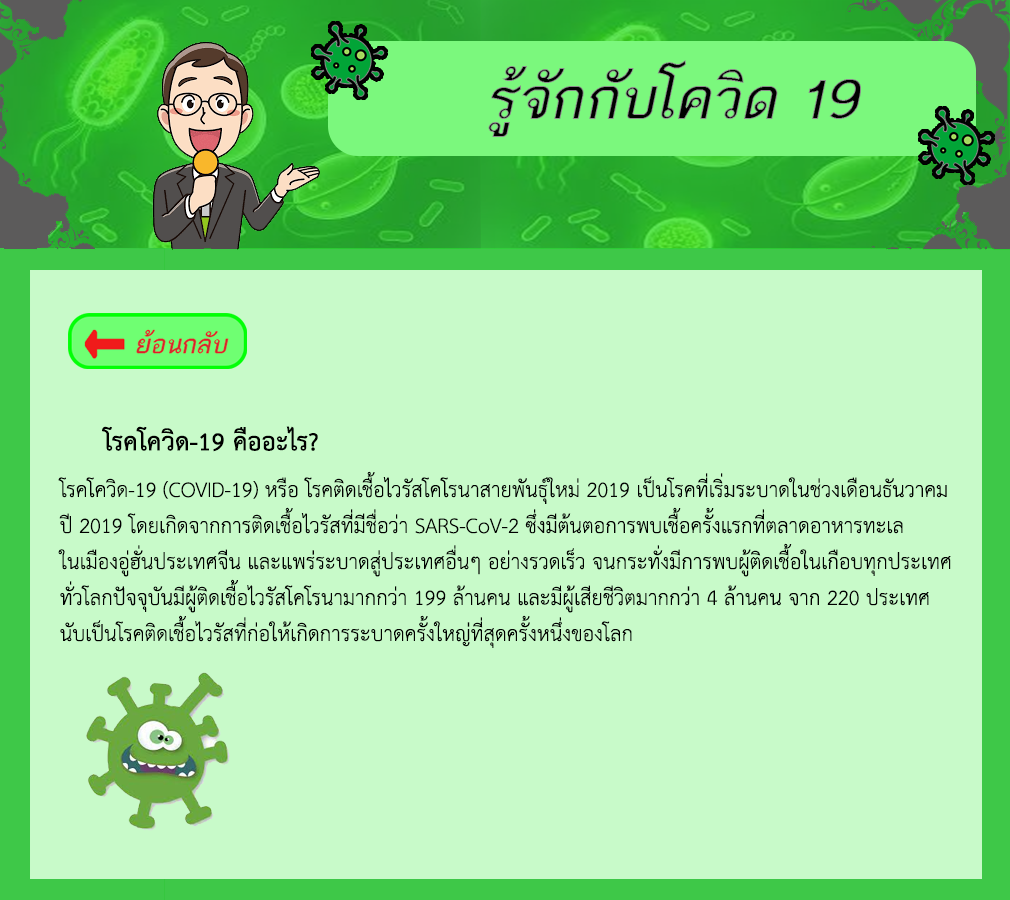
<style>
.page{position:relative;width:1010px;height:900px;background:#c8fac9}
.page>*{position:absolute;margin:0}
.t1{font:36px "THSarabunPSK-Bold";color:#000000}
.t2{font:30px "THSarabunPSK";color:#000000}
</style>
<div class="page">
<p class="t1" style="left:102px;top:426px;width:216px;height:26px">โรคโควิด-19 คืออะไร?</p>
<p class="t2" style="left:58px;top:471px;width:893px;height:177px">โรคโควิด-19 (COVID-19) หรือ โรคติดเชื้อไวรัสโคโรนาสายพันธุ์ใหม่ 2019 เป็นโรคที่เริ่มระบาดในช่วงเดือนธันวาคม<br>ปี 2019 โดยเกิดจากการติดเชื้อไวรัสที่มีชื่อว่า SARS-CoV-2 ซึ่งมีต้นตอการพบเชื้อครั้งแรกที่ตลาดอาหารทะเล<br>ในเมืองอู่ฮั่นประเทศจีน และแพร่ระบาดสู่ประเทศอื่นๆ อย่างรวดเร็ว จนกระทั่งมีการพบผู้ติดเชื้อในเกือบทุกประเทศ<br>ทั่วโลกปัจจุบันมีผู้ติดเชื้อไวรัสโคโรนามากกว่า 199 ล้านคน และมีผู้เสียชีวิตมากกว่า 4 ล้านคน จาก 220 ประเทศ<br>นับเป็นโรคติดเชื้อไวรัสที่ก่อให้เกิดการระบาดครั้งใหญ่ที่สุดครั้งหนึ่งของโลก</p>
</div>
